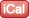
<style>
.page{position:relative;width:29px;height:18px}
.page>*{position:absolute;margin:0}
.t1{font:12px "Helvetica";color:#ffffff;font-weight:bold}
</style>
<div class="page">
<p class="t1" style="left:3px;top:4px;width:22px;height:10px">iCal</p>
</div>
